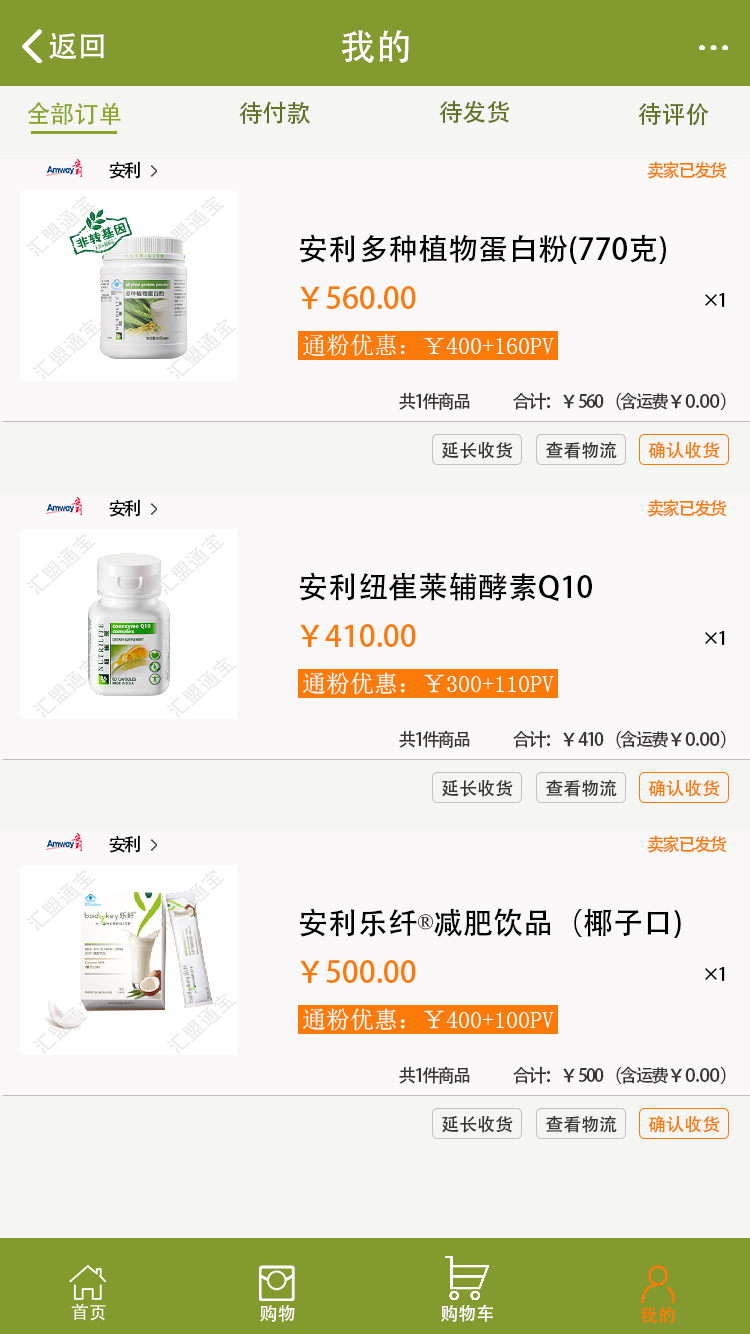
<style>
.page{position:relative;width:750px;height:1334px;background:#faf8f8}
.page>*{position:absolute;margin:0}
.t1{font:36px "AdobeHeitiStd-Regular";color:#ffffff}
.t2{font:30px "AdobeHeitiStd-Regular";color:#ffffff}
.t3{font:24px "AdobeHeitiStd-Regular";color:#8aa62a}
.t4{font:24px "AdobeHeitiStd-Regular";color:#607222}
.t5{font:18px "AdobeHeitiStd-Regular";letter-spacing:-0.12em;color:#000000}
.t6{font:18px "AdobeHeitiStd-Regular";letter-spacing:-0.12em;color:#fc7b08}
.t7{font:30px "AdobeHeitiStd-Regular";color:#000000}
.t8{font:30px "AdobeHeitiStd-Regular";color:#fc7b08}
.t9{font:24px "AdobeHeitiStd-Regular";color:#ffffff}
.t10{font:18px "AdobeHeitiStd-Regular";letter-spacing:-0.12em;color:#353534}
.t11{font:18px "AdobeHeitiStd-Regular";color:#353534}
.t12{font:18px "AdobeHeitiStd-Regular";color:#fc7b08}
.t13{font:30px "SimSun";color:#000000}
.t14{font:18px "AdobeHeitiStd-Regular";color:#ffffff}
</style>
<div class="page">
<p class="t1" style="left:341px;top:30px;width:68px;height:33px">我的</p>
<p class="t2" style="left:49px;top:33px;width:55px;height:26px">返回</p>
<p class="t3" style="left:27px;top:102px;width:94px;height:23px">全部订单</p>
<p class="t4" style="left:239px;top:101px;width:71px;height:23px">待付款</p>
<p class="t4" style="left:439px;top:100px;width:71px;height:23px">待发货</p>
<p class="t4" style="left:638px;top:102px;width:71px;height:24px">待评价</p>
<p class="t5" style="left:109px;top:161px;width:32px;height:18px">安利</p>
<p class="t6" style="left:647px;top:161px;width:80px;height:18px">卖家已发货</p>
<p class="t7" style="left:299px;top:234px;width:367px;height:30px">安利多种植物蛋白粉(770克)</p>
<p class="t8" style="left:300px;top:286px;width:116px;height:23px">￥560.00</p>
<p class="t5" style="left:705px;top:293px;width:20px;height:14px">×1</p>
<p class="t9" style="left:303px;top:334px;width:251px;height:22px">通粉优惠：￥400+160PV</p>
<p class="t10" style="left:399px;top:392px;width:327px;height:18px">共1件商品                       合计：<span class="t11">￥</span>560 （含运费<span class="t11">￥0.00）</span></p>
<p class="t11" style="left:442px;top:442px;width:71px;height:17px">延长收货</p>
<p class="t11" style="left:546px;top:441px;width:71px;height:18px">查看物流</p>
<p class="t12" style="left:648px;top:441px;width:72px;height:18px">确认收货</p>
<p class="t5" style="left:109px;top:499px;width:32px;height:18px">安利</p>
<p class="t6" style="left:647px;top:499px;width:80px;height:18px">卖家已发货</p>
<p class="t7" style="left:299px;top:572px;width:293px;height:29px">安利纽崔莱辅酵素Q10</p>
<p class="t8" style="left:300px;top:624px;width:116px;height:23px">￥410.00</p>
<p class="t5" style="left:705px;top:631px;width:20px;height:14px">×1</p>
<p class="t9" style="left:303px;top:672px;width:251px;height:23px">通粉优惠：￥300+110PV</p>
<p class="t10" style="left:399px;top:730px;width:327px;height:18px">共1件商品                       合计：<span class="t11">￥</span>410 （含运费<span class="t11">￥0.00）</span></p>
<p class="t11" style="left:442px;top:780px;width:71px;height:17px">延长收货</p>
<p class="t11" style="left:546px;top:779px;width:71px;height:18px">查看物流</p>
<p class="t12" style="left:648px;top:779px;width:72px;height:18px">确认收货</p>
<p class="t5" style="left:109px;top:835px;width:32px;height:18px">安利</p>
<p class="t6" style="left:647px;top:835px;width:80px;height:18px">卖家已发货</p>
<p class="t7" style="left:299px;top:908px;width:382px;height:30px">安利乐纤<span class="t13">®</span>减肥饮品（椰子口)</p>
<p class="t8" style="left:300px;top:960px;width:116px;height:23px">￥500.00</p>
<p class="t5" style="left:705px;top:967px;width:20px;height:14px">×1</p>
<p class="t9" style="left:303px;top:1008px;width:251px;height:23px">通粉优惠：￥400+100PV</p>
<p class="t10" style="left:399px;top:1066px;width:327px;height:18px">共1件商品                       合计：<span class="t11">￥</span>500 （含运费<span class="t11">￥0.00）</span></p>
<p class="t11" style="left:442px;top:1116px;width:71px;height:17px">延长收货</p>
<p class="t11" style="left:546px;top:1115px;width:71px;height:18px">查看物流</p>
<p class="t12" style="left:648px;top:1115px;width:72px;height:18px">确认收货</p>
<p class="t14" style="left:441px;top:1304px;width:52px;height:18px">购物车</p>
<p class="t12" style="left:640px;top:1306px;width:35px;height:18px">我的</p>
</div>
